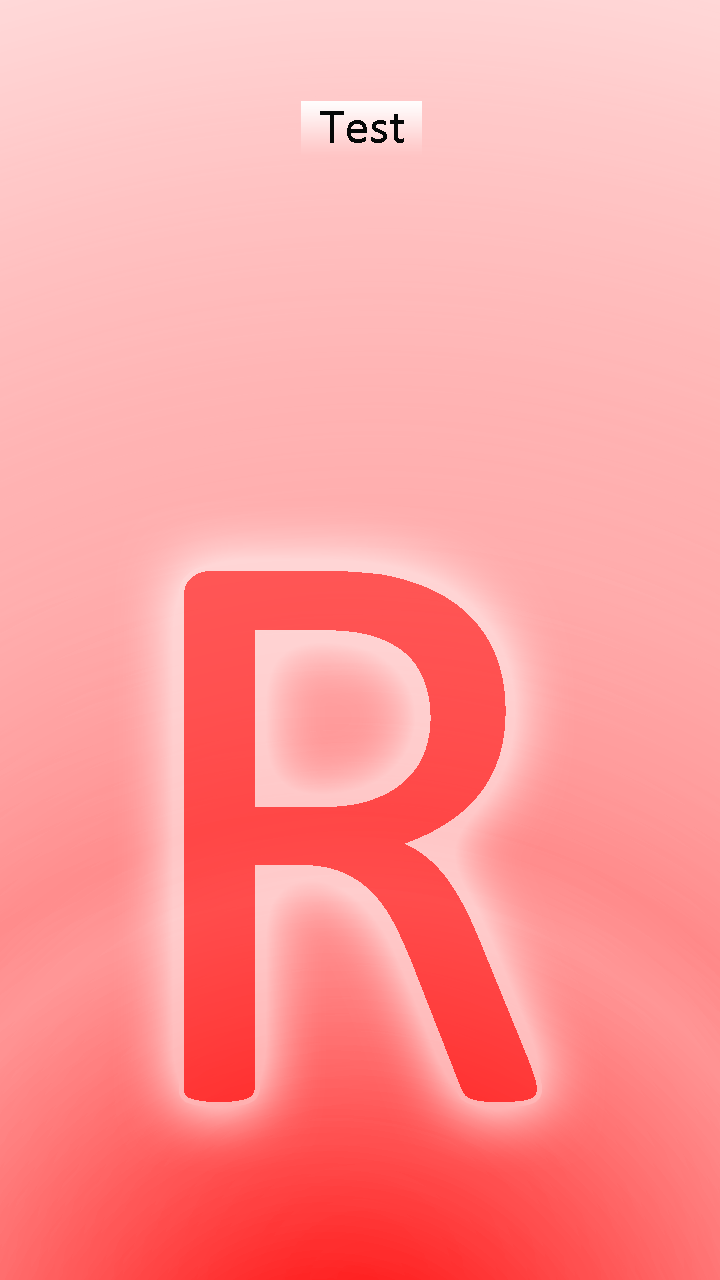
<style>
.page{position:relative;width:720px;height:1280px}
.page>*{position:absolute;margin:0}
.t1{font:50px "Calibri";color:#060808}
.t2{font:835.9px "Calibri";color:#ff4a4a}
</style>
<div class="page">
<p class="t1" style="left:320px;top:111px;width:84px;height:32px">Test</p>
<p class="t2" style="left:184px;top:571px;width:353px;height:531px">R</p>
</div>
